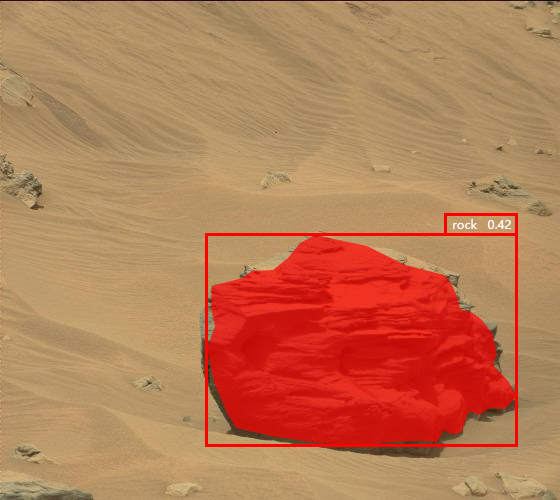
<style>
.page{position:relative;width:560px;height:500px}
.page>*{position:absolute;margin:0}
.t1{font:12px "MicrosoftYaHeiUI";color:#ffffff}
</style>
<div class="page">
<p class="t1" style="left:453px;top:219px;width:58px;height:10px">rock   0.42</p>
</div>
